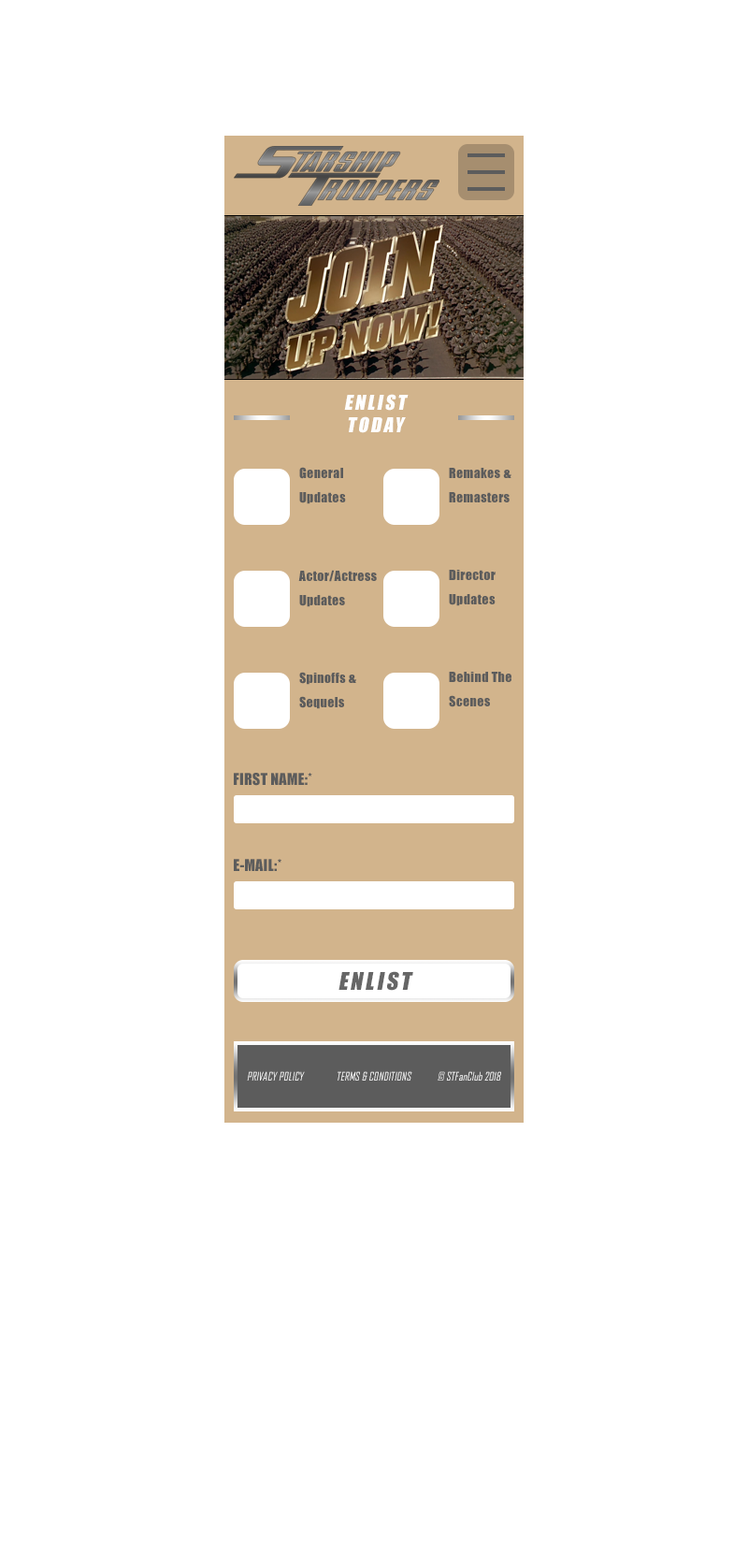
<style>
.page{position:relative;width:748px;height:1568px;background:#ffffff}
.page>*{position:absolute;margin:0}
.t1{font:19px "Impact";letter-spacing:0.125em;color:#fefefe;font-style:italic}
.t2{font:13.1px/24.1px "Impact";letter-spacing:0.025em;color:#5c5c5c}
.t3{font:13.1px/24.1px "Impact";letter-spacing:0.02em;color:#5c5c5c}
.t4{font:15px "Impact";letter-spacing:0.02em;color:#5c5c5c}
.t5{font:22.5px "Impact";letter-spacing:0.125em;color:#666666;font-style:italic}
.t6{font:11.2px "AgencyFB-Reg";color:#ffffff;font-style:italic}
</style>
<div class="page">
<p class="t1" style="left:344px;top:394px;width:65px;height:39px;text-align:center">ENLIST<br>TODAY</p>
<p class="t2" style="left:299px;top:467px;width:47px;height:37px">General Updates</p>
<p class="t2" style="left:449px;top:468px;width:63px;height:34px">Remakes &amp; Remasters</p>
<p class="t3" style="left:298px;top:570px;width:79px;height:37px">Actor/Actress Updates</p>
<p class="t2" style="left:449px;top:570px;width:47px;height:36px">Director Updates</p>
<p class="t3" style="left:299px;top:672px;width:57px;height:37px">Spinoffs &amp; Sequels</p>
<p class="t2" style="left:449px;top:672px;width:63px;height:35px">Behind The Scenes</p>
<p class="t4" style="left:234px;top:773px;width:78px;height:13px">FIRST NAME:*</p>
<p class="t4" style="left:234px;top:859px;width:48px;height:12px">E-MAIL:*</p>
<p class="t5" style="left:339px;top:971px;width:75px;height:20px">ENLIST</p>
<p class="t6" style="left:247px;top:1071px;width:254px;height:10px">PRIVACY POLICY             TERMS &amp; CONDITIONS            © STFanClub 2018</p>
</div>
